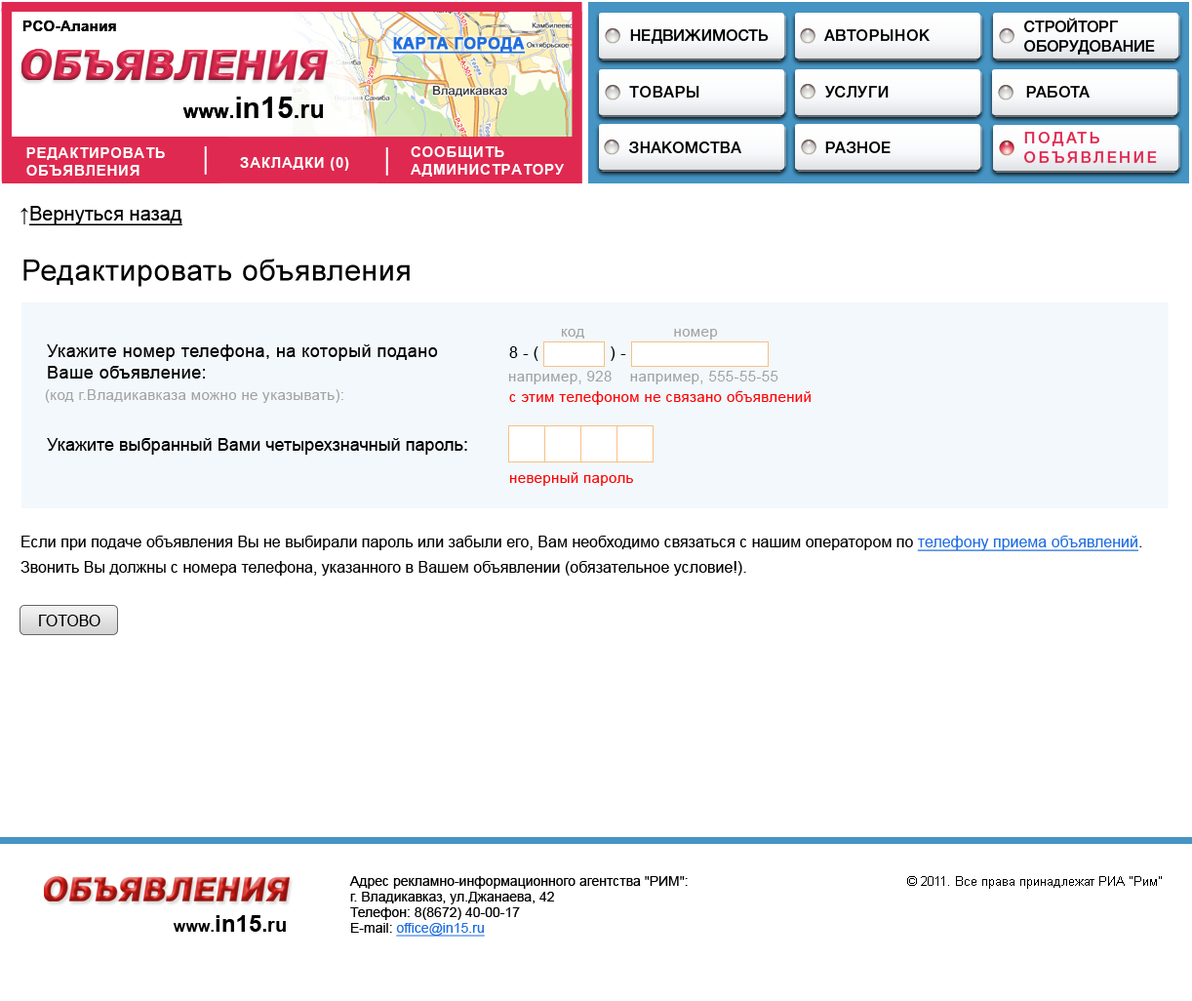
<style>
.page{position:relative;width:1192px;height:1001px;background:#ffffff}
.page>*{position:absolute;margin:0}
.t1{font:15.6px/4.9px "HelveticaNeueCyr-Medium";color:#000000;text-transform:uppercase}
.t2{font:15.6px "HelveticaNeueCyr-Medium";color:#000000;text-transform:uppercase}
.t3{font:15.6px "HelveticaNeueCyr-Medium";letter-spacing:0.04em;color:#000000;text-transform:uppercase}
.t4{font:15.6px/4.9px "HelveticaNeueCyr-Medium";letter-spacing:0.16em;color:#e02950;text-transform:uppercase}
.t5{font:15.6px "HelveticaNeueCyr-Medium";letter-spacing:0.02em;color:#000000;text-transform:uppercase}
.t6{font:19.5px "ArialMT";color:#000000;text-decoration:underline}
.t7{font:19.5px "ArialMT";color:#000000}
.t8{font:29.3px "ArialMT";letter-spacing:0.025em;color:#000000}
.t9{font:14.6px "ArialMT";letter-spacing:0.025em;color:#a2a2a2}
.t10{font:17.6px "ArialMT";letter-spacing:0.025em;color:#000000}
.t11{font:15.6px "ArialMT";letter-spacing:0.025em;color:#000000}
.t12{font:14.6px "ArialMT";letter-spacing:0.025em;color:#ff0000}
.t13{font:17.6px "ArialMT";color:#000000}
.t14{font:15.6px/25.4px "ArialMT";color:#000000}
.t15{font:15.6px/25.4px "ArialMT";color:#206de0;text-decoration:underline}
.t16{font:15.6px "ArialMT";color:#000000;text-transform:uppercase}
.t17{font:13.7px/1px "ArialMT";color:#000000}
.t18{font:13.7px/1px "ArialMT";color:#206de0;text-decoration:underline}
.t19{font:12.7px "ArialMT";color:#000000}
.t20{font:15.7px "Arial-BoldMT";color:#000000}
.t21{font:23.6px "Arial-BoldMT";color:#000000}
.t22{font:19.7px "Arial-BoldMT";color:#000000}
</style>
<div class="page">
<p class="t1" style="left:1024px;top:18px;width:131px;height:37px">Стройторг<br>Оборудование</p>
<p class="t2" style="left:630px;top:29px;width:138px;height:15px">Недвижимость</p>
<p class="t3" style="left:824px;top:29px;width:105px;height:12px">Авторынок</p>
<p class="t3" style="left:629px;top:86px;width:70px;height:12px">товары</p>
<p class="t3" style="left:825px;top:86px;width:63px;height:12px">Услуги</p>
<p class="t3" style="left:1026px;top:86px;width:63px;height:12px">работа</p>
<p class="t4" style="left:1024px;top:132px;width:133px;height:31px">Подать<br>Объявление</p>
<p class="t5" style="left:629px;top:141px;width:112px;height:12px">Знакомства</p>
<p class="t3" style="left:825px;top:141px;width:65px;height:12px">Разное</p>
<p class="t6" style="left:20px;top:206px;width:162px;height:19px"><span class="t7">↑</span>Вернуться назад</p>
<p class="t8" style="left:23px;top:258px;width:387px;height:29px">Редактировать объявления</p>
<p class="t9" style="left:561px;top:329px;width:157px;height:10px">код                    номер</p>
<p class="t10" style="left:47px;top:344px;width:391px;height:34px">Укажите номер телефона, на который подано <br>Ваше объявление:</p>
<p class="t11" style="left:509px;top:346px;width:117px;height:15px">8 - (               ) -</p>
<p class="t9" style="left:508px;top:371px;width:270px;height:13px">например, 928    например, 555-55-55</p>
<p class="t9" style="left:45px;top:389px;width:298px;height:14px">(код г.Владикавказа можно не указывать):</p>
<p class="t12" style="left:509px;top:391px;width:301px;height:14px">с этим телефоном не связано объявлений</p>
<p class="t13" style="left:47px;top:438px;width:420px;height:16px">Укажите выбранный Вами четырехзначный пароль:</p>
<p class="t12" style="left:509px;top:472px;width:124px;height:14px">неверный пароль</p>
<p class="t14" style="left:20px;top:535px;width:1122px;height:40px">Если при подаче объявления Вы не выбирали пароль или забыли его, Вам необходимо связаться с нашим оператором по <span class="t15">телефону приема объявлений</span>. <br>Звонить Вы должны с номера телефона, указанного в Вашем объявлении (обязательное условие!).</p>
<p class="t16" style="left:39px;top:614px;width:61px;height:12px">Готово</p>
<p class="t17" style="left:349px;top:876px;width:339px;height:60px">Адрес рекламно-информационного агентства "РИМ":<br>г. Владикавказ, ул.Джанаева, 42<br>Телефон: 8(8672) 40-00-17<br>E-mail: <span class="t18">office@in15.ru</span></p>
<p class="t19" style="left:907px;top:876px;width:255px;height:12px">© 2011. Все права принадлежат РИА "Рим”</p>
<p class="t20" style="left:173px;top:915px;width:113px;height:16px">www.<span class="t21">in15</span><span class="t22">.ru</span></p>
</div>
